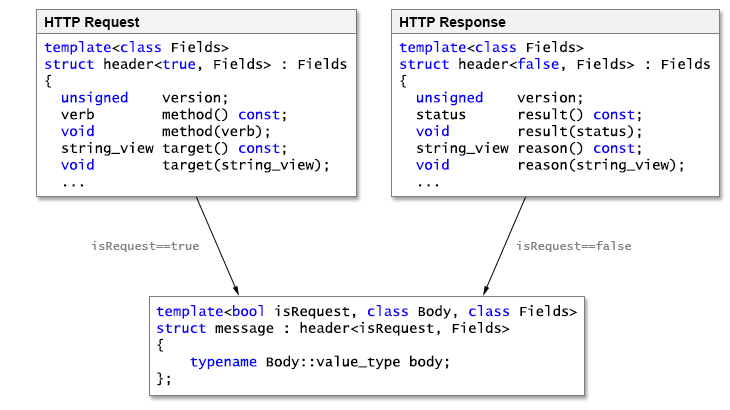
<style>
.page{position:relative;width:730px;height:410px;background:#ffffff}
.page>*{position:absolute;margin:0}
.t1{font:14px "Arial-BoldMT";color:#010101}
.t2{font:14px "LucidaConsole";color:#000000}
.t3{font:14px "LucidaConsole";color:#0c00ff}
.t4{font:14px "LucidaConsole";color:#0000ff}
.t5{font:12px "LucidaConsole";color:#808080}
</style>
<div class="page">
<p class="t1" style="left:45px;top:17px;width:95px;height:13px">HTTP Request</p>
<p class="t1" style="left:400px;top:17px;width:106px;height:13px">HTTP Response</p>
<p class="t2" style="left:44px;top:41px;width:303px;height:146px"><span class="t3">template</span>&lt;<span class="t3">class </span>Fields&gt;<br><span class="t3">struct </span>header&lt;<span class="t4">true</span>, Fields&gt; : Fields<br>{<br>  <span class="t4">unsigned</span>    version;<br>  verb        method() <span class="t3">const</span>;<br>  <span class="t3">void</span>        method(verb);<br>  string_view target() <span class="t3">const</span>;<br>  <span class="t3">void</span>        target(string_view);<br>  ...</p>
<p class="t2" style="left:399px;top:41px;width:311px;height:146px"><span class="t3">template</span>&lt;<span class="t3">class </span>Fields&gt;<br><span class="t3">struct </span>header&lt;<span class="t4">false</span>, Fields&gt; : Fields<br>{<br>  <span class="t4">unsigned</span>    version;<br>  status      result() <span class="t3">const</span>;<br><span class="t3">  void</span>        result(status);<br>  string_view reason() <span class="t3">const</span>;<br>  <span class="t3">void</span>        reason(string_view);<br>  ...</p>
<p class="t5" style="left:91px;top:241px;width:108px;height:11px">isRequest==true</p>
<p class="t5" style="left:516px;top:241px;width:116px;height:11px">isRequest==false</p>
<p class="t2" style="left:156px;top:305px;width:422px;height:81px"><span class="t3">template</span>&lt;<span class="t3">bool</span> isRequest, <span class="t3">class</span> Body, <span class="t3">class</span> Fields&gt;<br><span class="t3">struct </span>message : header&lt;isRequest, Fields&gt;<br>{<br>    <span class="t4">typename</span> Body::value_type body;<br>};</p>
</div>
